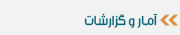
<style>
.page{position:relative;width:180px;height:35px;background:#f1f2f2}
.page>*{position:absolute;margin:0}
.t1{font:14px "Mj_Flow";letter-spacing:-0.001em;color:#0d6579}
</style>
<div class="page">
<p class="t1" style="left:84px;top:13px;width:74px;height:15px">آمـار و گزارشات</p>
</div>
